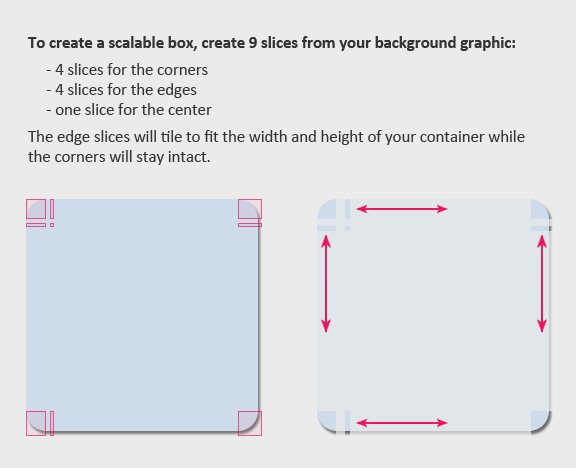
<style>
.page{position:relative;width:576px;height:468px;background:#ebebeb}
.page>*{position:absolute;margin:0}
.t1{font:16.7px "Calibri";color:#333333}
.t2{font:16.7px "Calibri-Bold";color:#333333}
</style>
<div class="page">
<p class="t1" style="left:28px;top:36px;width:497px;height:129px"><span class="t2">To create a scalable box, create 9 slices from your background graphic:<br></span>- 4 slices for the corners<br>- 4 slices for the edges<br>- one slice for the center<br>The edge slices will tile to fit the width and height of your container while  the corners will stay intact.</p>
</div>
